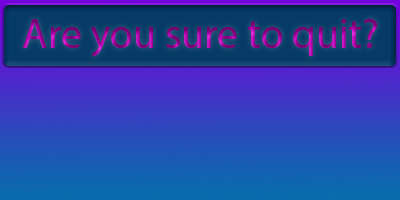
<style>
.page{position:relative;width:400px;height:200px}
.page>*{position:absolute;margin:0}
.t1{font:41.7px "MyriadPro-Regular"}
</style>
<div class="page">
<p class="t1" style="left:23px;top:19px;width:354px;height:38px">Are you sure to quit?</p>
<p class="t1" style="left:23px;top:19px;width:354px;height:38px">Are you sure to quit?</p>
</div>
